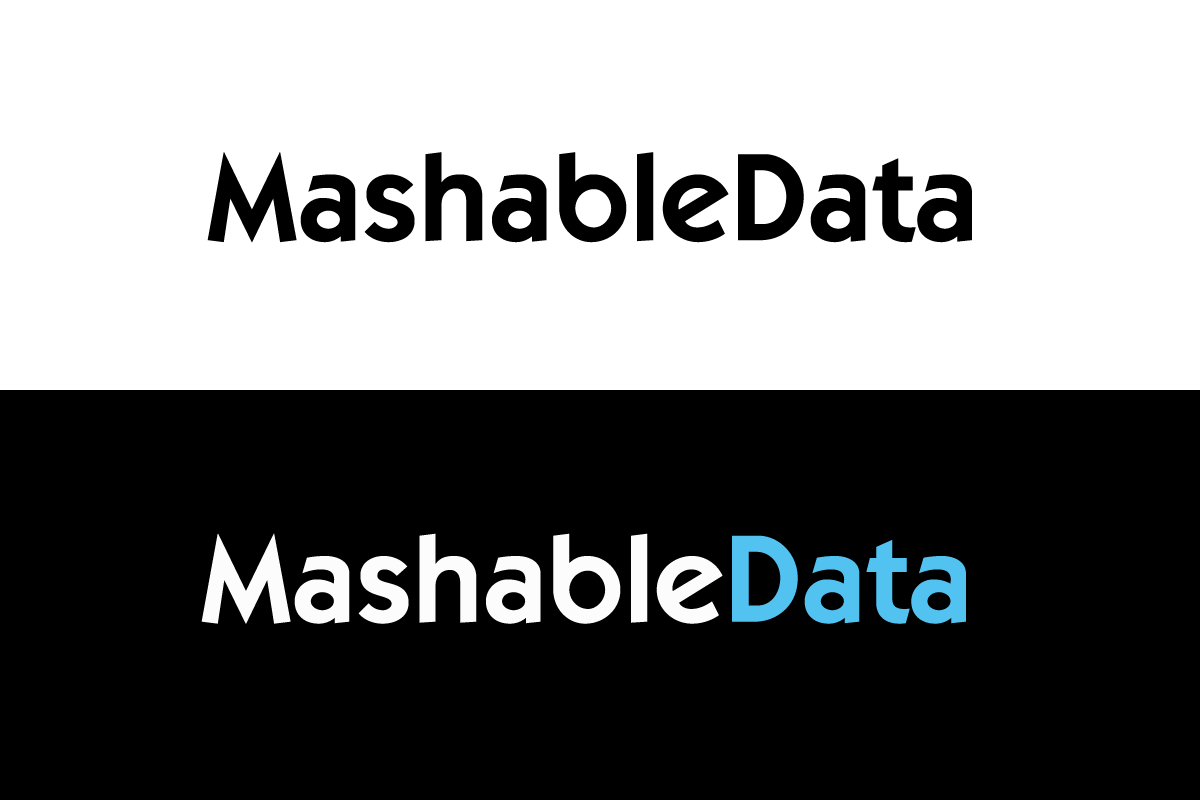
<style>
.page{position:relative;width:1200px;height:800px;background:#000000}
.page>*{position:absolute;margin:0}
.t1{font:125px "ItcKabel-Demi";letter-spacing:0.01em;color:#000000}
.t2{font:125px "ItcKabel-Demi";letter-spacing:0.01em;color:#fcfcfc}
.t3{font:125px "ItcKabel-Demi";letter-spacing:0.01em;color:#52c2f0}
</style>
<div class="page">
<p class="t1" style="left:207px;top:152px;width:765px;height:91px">MashableData</p>
<p class="t2" style="left:201px;top:533px;width:765px;height:91px">Mashable<span class="t3">Data</span></p>
</div>
